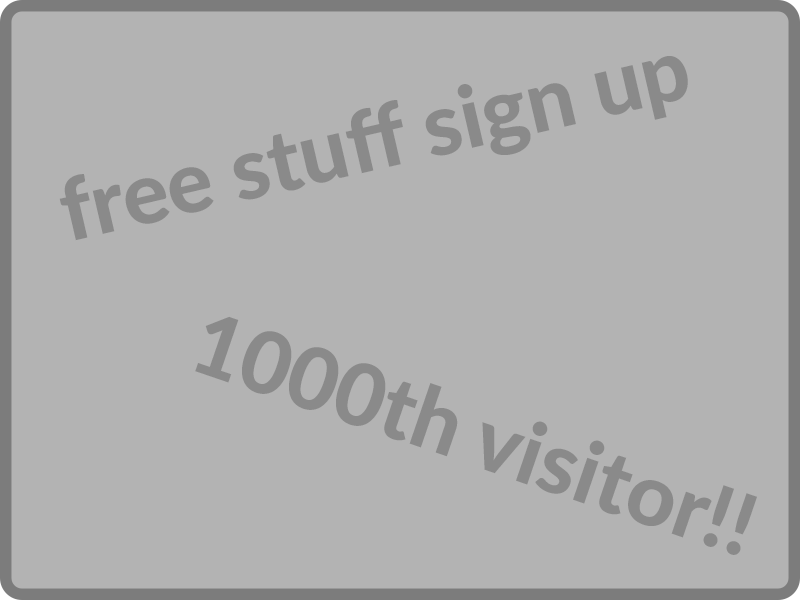
<style>
.page{position:relative;width:800px;height:600px;background:#b3b3b3}
.page>*{position:absolute;margin:0}
.t1{font:85.8px "Lato-Heavy";color:#8a8a8a}
</style>
<div class="page">
<p class="t1" style="left:59px;top:56px;width:629px;height:185px;rotate:-13deg">free stuff sign up</p>
<p class="t1" style="left:195px;top:316px;width:562px;height:239px;rotate:19deg">1000th visitor!!</p>
</div>
